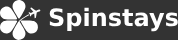
<style>
.page{position:relative;width:178px;height:40px;background:#333333}
.page>*{position:absolute;margin:0}
.t1{font:24px "DejaVuSans-Bold";color:#ffffff}
</style>
<div class="page">
<p class="t1" style="left:49px;top:7px;width:129px;height:25px">Spinstays</p>
</div>
